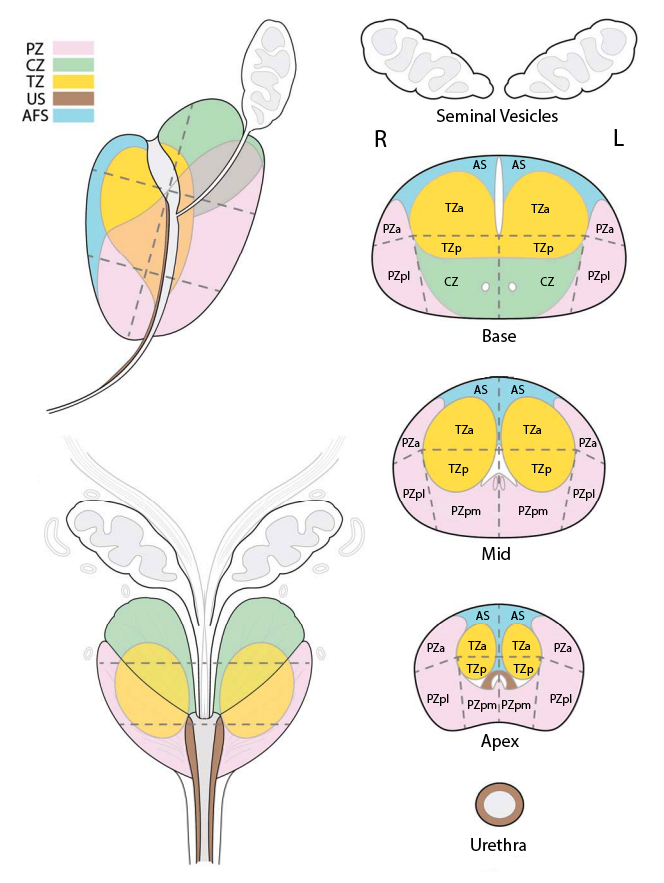
<style>
.page{position:relative;width:664px;height:883px;background:#ffffff}
.page>*{position:absolute;margin:0}
.t1{font:18px "MyriadPro-Regular";color:#000000}
.t2{font:12px "MyriadPro-Regular";color:#000000}
</style>
<div class="page">
<p class="t1" style="left:437px;top:109px;width:121px;height:13px">Seminal Vesicles</p>
<p class="t2" style="left:473px;top:160px;width:14px;height:9px">AS</p>
<p class="t2" style="left:512px;top:160px;width:14px;height:9px">AS</p>
<p class="t2" style="left:445px;top:203px;width:19px;height:9px">TZa</p>
<p class="t2" style="left:531px;top:204px;width:19px;height:9px">TZa</p>
<p class="t2" style="left:383px;top:224px;width:18px;height:9px">PZa</p>
<p class="t2" style="left:596px;top:224px;width:18px;height:9px">PZa</p>
<p class="t2" style="left:441px;top:243px;width:21px;height:12px">TZp</p>
<p class="t2" style="left:533px;top:243px;width:21px;height:12px">TZp</p>
<p class="t2" style="left:388px;top:271px;width:22px;height:12px">PZpl</p>
<p class="t2" style="left:444px;top:277px;width:14px;height:9px">CZ</p>
<p class="t2" style="left:540px;top:277px;width:14px;height:9px">CZ</p>
<p class="t2" style="left:588px;top:271px;width:22px;height:12px">PZpl</p>
<p class="t1" style="left:483px;top:329px;width:33px;height:13px">Base</p>
<p class="t2" style="left:474px;top:385px;width:14px;height:9px">AS</p>
<p class="t2" style="left:511px;top:385px;width:14px;height:9px">AS</p>
<p class="t2" style="left:455px;top:425px;width:19px;height:9px">TZa</p>
<p class="t2" style="left:523px;top:425px;width:19px;height:9px">TZa</p>
<p class="t2" style="left:402px;top:438px;width:18px;height:9px">PZa</p>
<p class="t2" style="left:579px;top:438px;width:18px;height:9px">PZa</p>
<p class="t2" style="left:448px;top:464px;width:21px;height:12px">TZp</p>
<p class="t2" style="left:531px;top:464px;width:21px;height:12px">TZp</p>
<p class="t2" style="left:403px;top:489px;width:22px;height:12px">PZpl</p>
<p class="t2" style="left:573px;top:489px;width:22px;height:12px">PZpl</p>
<p class="t2" style="left:452px;top:506px;width:29px;height:12px">PZpm</p>
<p class="t2" style="left:519px;top:506px;width:29px;height:12px">PZpm</p>
<p class="t1" style="left:482px;top:547px;width:28px;height:13px">Mid</p>
<p class="t2" style="left:476px;top:611px;width:14px;height:9px">AS</p>
<p class="t2" style="left:511px;top:611px;width:14px;height:9px">AS</p>
<p class="t2" style="left:468px;top:641px;width:19px;height:9px">TZa</p>
<p class="t2" style="left:512px;top:641px;width:19px;height:9px">TZa</p>
<p class="t2" style="left:427px;top:643px;width:18px;height:9px">PZa</p>
<p class="t2" style="left:554px;top:643px;width:18px;height:9px">PZa</p>
<p class="t2" style="left:466px;top:664px;width:21px;height:12px">TZp</p>
<p class="t2" style="left:513px;top:664px;width:21px;height:12px">TZp</p>
<p class="t2" style="left:427px;top:694px;width:22px;height:12px">PZpl</p>
<p class="t2" style="left:468px;top:700px;width:29px;height:12px">PZpm</p>
<p class="t2" style="left:502px;top:700px;width:29px;height:12px">PZpm</p>
<p class="t2" style="left:550px;top:694px;width:22px;height:12px">PZpl</p>
<p class="t1" style="left:481px;top:734px;width:38px;height:17px">Apex</p>
<p class="t1" style="left:471px;top:838px;width:55px;height:13px">Urethra</p>
</div>
